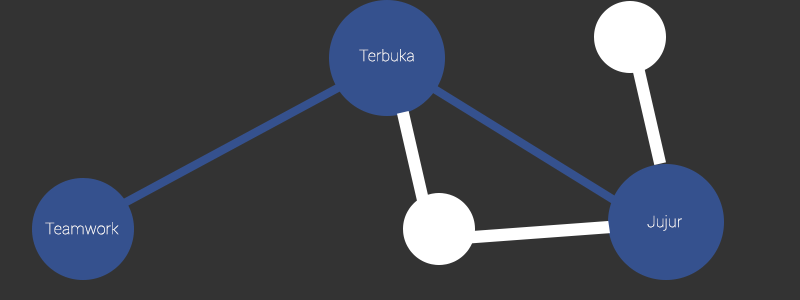
<style>
.page{position:relative;width:800px;height:300px;background:#333333}
.page>*{position:absolute;margin:0}
.t1{font:16px "Roboto-Thin";color:#ffffff}
</style>
<div class="page">
<p class="t1" style="left:359px;top:49px;width:55px;height:13px">Terbuka</p>
<p class="t1" style="left:45px;top:222px;width:74px;height:13px">Teamwork</p>
<p class="t1" style="left:647px;top:215px;width:35px;height:16px">Jujur</p>
</div>
